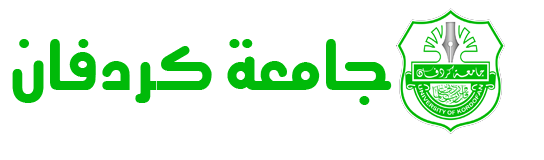
<style>
.page{position:relative;width:544px;height:160px;background:#ffffff}
.page>*{position:absolute;margin:0}
.t1{font:66.3px "";color:#00ba09}
</style>
<div class="page">
<p class="t1" style="left:12px;top:39px;width:380px;height:66px">جامعة كردفان</p>
</div>
